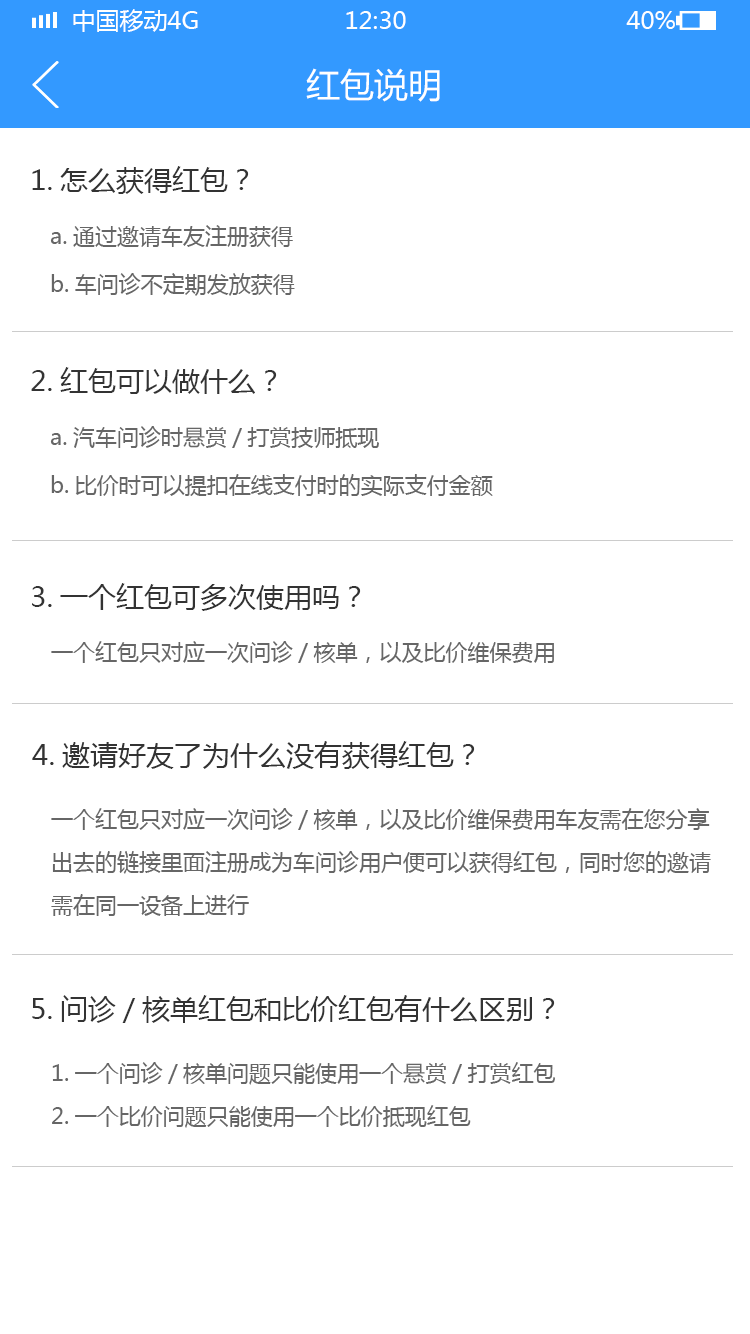
<style>
.page{position:relative;width:750px;height:1334px;background:#ffffff}
.page>*{position:absolute;margin:0}
.t1{font:24px "MicrosoftYaHei";color:#ffffff;text-transform:uppercase}
.t2{font:34px "MicrosoftYaHei";color:#ffffff}
.t3{font:28px "MicrosoftYaHei";color:#333333}
.t4{font:22px/48px "MicrosoftYaHei";color:#666666}
.t5{font:22px "MicrosoftYaHei";color:#666666}
.t6{font:22px/43px "MicrosoftYaHei";color:#666666}
</style>
<div class="page">
<p class="t1" style="left:73px;top:9px;width:125px;height:23px">中国移动4G</p>
<p class="t1" style="left:346px;top:11px;width:60px;height:18px">12:30</p>
<p class="t1" style="left:626px;top:11px;width:49px;height:18px">40%</p>
<p class="t2" style="left:306px;top:68px;width:134px;height:34px">红包说明</p>
<p class="t3" style="left:32px;top:166px;width:217px;height:28px">1.怎么获得红包？</p>
<p class="t4" style="left:50px;top:225px;width:245px;height:71px">a.通过邀请车友注册获得<br>b.车问诊不定期发放获得</p>
<p class="t3" style="left:31px;top:367px;width:246px;height:27px">2.红包可以做什么？</p>
<p class="t4" style="left:50px;top:426px;width:443px;height:70px">a.汽车问诊时悬赏/打赏技师抵现<br>b.比价时可以提扣在线支付时的实际支付金额</p>
<p class="t3" style="left:32px;top:583px;width:329px;height:28px">3.一个红包可多次使用吗？</p>
<p class="t5" style="left:51px;top:641px;width:503px;height:22px">一个红包只对应一次问诊/核单，以及比价维保费用</p>
<p class="t3" style="left:32px;top:741px;width:443px;height:28px">4.邀请好友了为什么没有获得红包？</p>
<p class="t6" style="left:51px;top:808px;width:660px;height:108px">一个红包只对应一次问诊/核单，以及比价维保费用车友需在您分享<br>出去的链接里面注册成为车问诊用户便可以获得红包，同时您的邀请<br>需在同一设备上进行</p>
<p class="t3" style="left:32px;top:995px;width:523px;height:28px">5.问诊/核单红包和比价红包有什么区别？</p>
<p class="t6" style="left:52px;top:1062px;width:503px;height:66px">1.一个问诊/核单问题只能使用一个悬赏/打赏红包<br>2.一个比价问题只能使用一个比价抵现红包</p>
</div>
